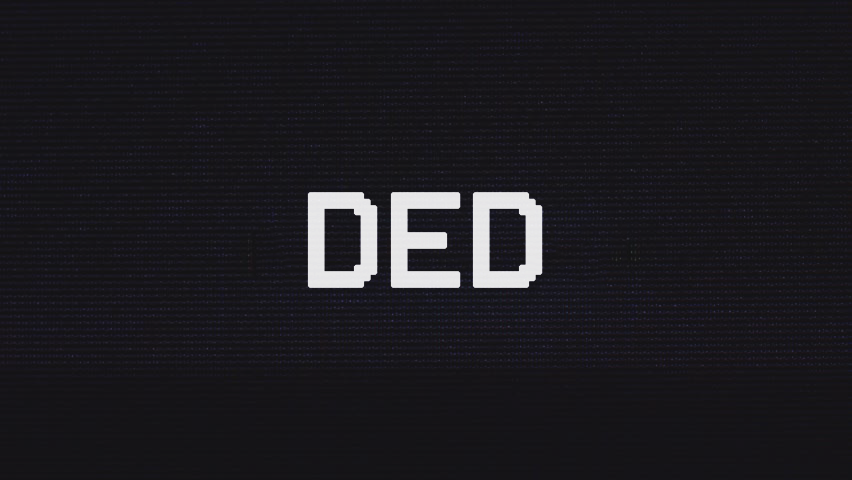
<style>
.page{position:relative;width:852px;height:480px}
.page>*{position:absolute;margin:0}
.t1{font:135.3px "VCROSDMono";color:#e7e7e8;font-weight:bold}
</style>
<div class="page">
<p class="t1" style="left:307px;top:192px;width:236px;height:96px">DED</p>
</div>
